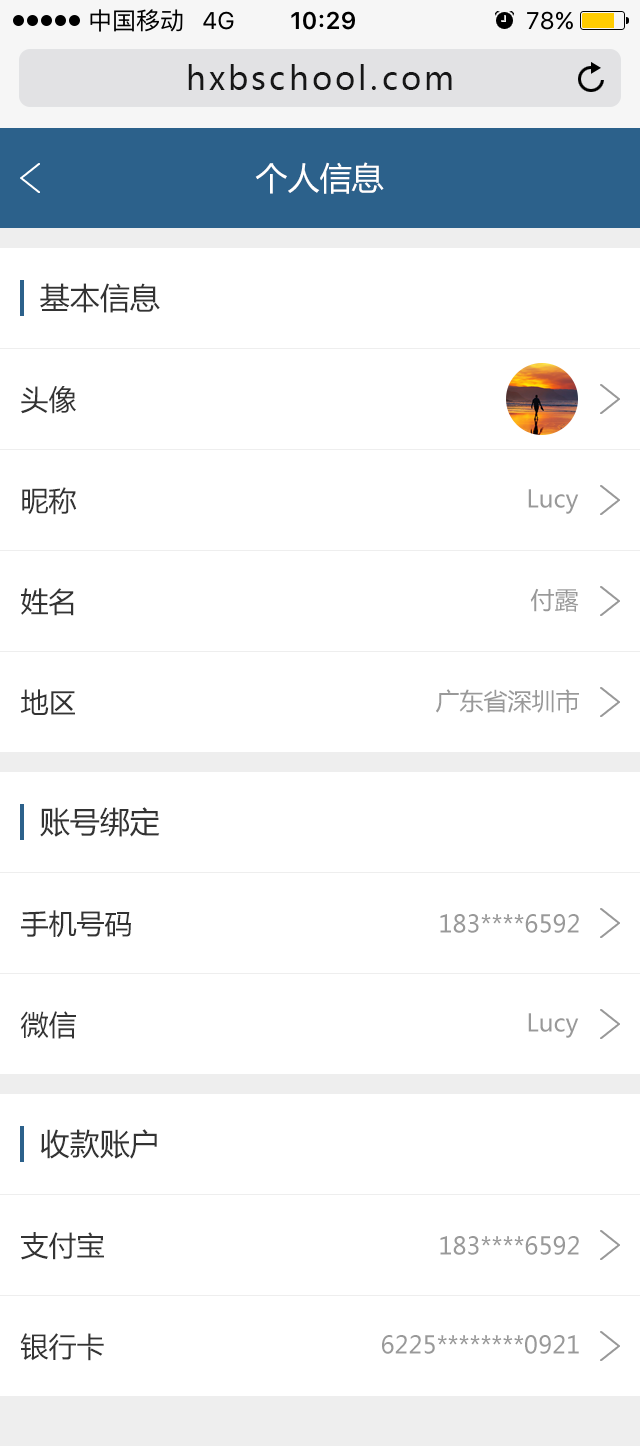
<style>
.page{position:relative;width:640px;height:1446px;background:#ffffff}
.page>*{position:absolute;margin:0}
.t1{font:32px "MicrosoftYaHei";letter-spacing:0.1em;color:#171717}
.t2{font:32px "MicrosoftYaHei";color:#ffffff}
.t3{font:30px "MicrosoftYaHei";color:#333333}
.t4{font:28px "MicrosoftYaHei";color:#333333}
.t5{font:24px "MicrosoftYaHei";color:#999999}
</style>
<div class="page">
<p class="t1" style="left:188px;top:64px;width:264px;height:26px">hxbschool.com</p>
<p class="t2" style="left:255px;top:162px;width:129px;height:32px">个人信息</p>
<p class="t3" style="left:40px;top:283px;width:120px;height:30px">基本信息</p>
<p class="t4" style="left:21px;top:386px;width:55px;height:28px">头像</p>
<p class="t4" style="left:22px;top:487px;width:55px;height:28px">昵称</p>
<p class="t5" style="left:528px;top:489px;width:51px;height:25px">Lucy</p>
<p class="t4" style="left:21px;top:588px;width:53px;height:28px">姓名</p>
<p class="t5" style="left:530px;top:588px;width:49px;height:24px">付露</p>
<p class="t4" style="left:20px;top:689px;width:55px;height:26px">地区</p>
<p class="t5" style="left:436px;top:689px;width:143px;height:24px">广东省深圳市</p>
<p class="t3" style="left:40px;top:807px;width:120px;height:30px">账号绑定</p>
<p class="t4" style="left:21px;top:910px;width:110px;height:28px">手机号码</p>
<p class="t5" style="left:440px;top:914px;width:139px;height:19px">183****6592</p>
<p class="t4" style="left:21px;top:1011px;width:55px;height:28px">微信</p>
<p class="t5" style="left:528px;top:1013px;width:51px;height:25px">Lucy</p>
<p class="t3" style="left:40px;top:1129px;width:117px;height:30px">收款账户</p>
<p class="t4" style="left:21px;top:1232px;width:83px;height:28px">支付宝</p>
<p class="t5" style="left:440px;top:1236px;width:139px;height:19px">183****6592</p>
<p class="t4" style="left:20px;top:1333px;width:84px;height:28px">银行卡</p>
<p class="t5" style="left:382px;top:1335px;width:197px;height:19px">6225********0921</p>
</div>
